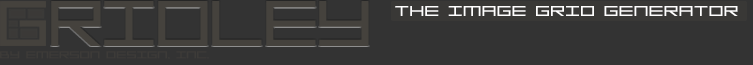
<style>
.page{position:relative;width:753px;height:65px;background:#333333}
.page>*{position:absolute;margin:0}
.t1{font:14.1px "MGS2Menu";letter-spacing:0.12em;color:#ffffff;text-transform:uppercase;scale:0.65 1}
.t2{font:9.7px "MGS2Menu";letter-spacing:0.12em;color:#423f3a;text-transform:uppercase;scale:0.65 1}
</style>
<div class="page">
<p class="t1" style="left:395px;top:6px;width:343px;height:10px">THE IMAGE GRID GENERATOR</p>
<p class="t2" style="left:0px;top:51px;width:209px;height:9px;opacity:0.6">by Emerson Design, Inc.</p>
</div>
